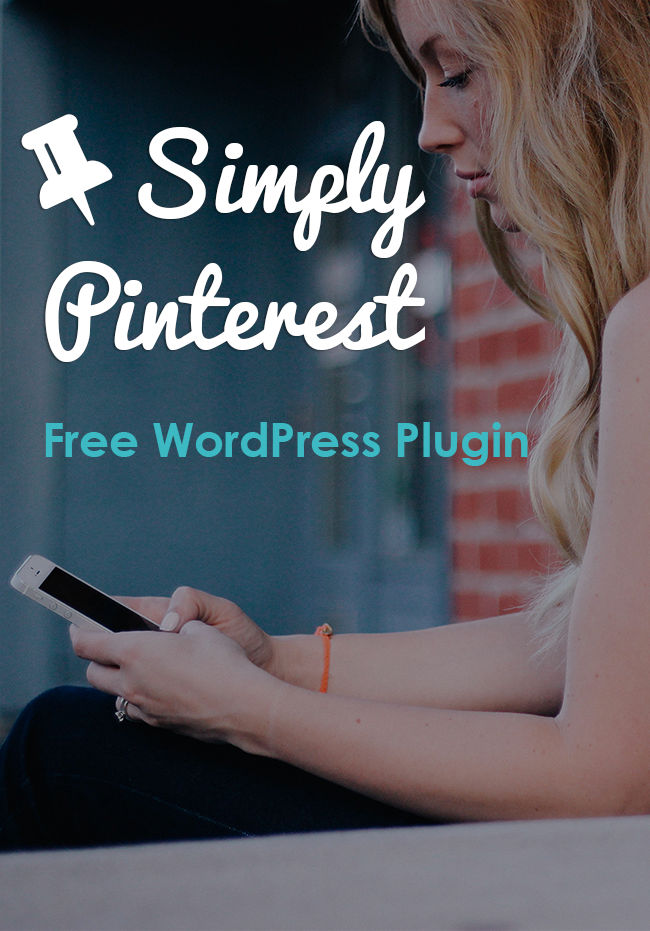
<style>
.page{position:relative;width:650px;height:931px}
.page>*{position:absolute;margin:0}
.t1{font:100px/136.7px "Pacifico";color:#ffffff}
.t2{font:103.3px "FontAwesome";color:#ffffff}
.t3{font:100px "Pacifico";color:#ffffff}
.t4{font:46.7px "CenturyGothic-Bold";color:#3cb9c2}
</style>
<div class="page">
<p class="t1" style="left:45px;top:121px;width:381px;height:241px"><span class="t2">   </span><span class="t3">Simply<br></span>Pinterest</p>
<p class="t4" style="left:45px;top:422px;width:483px;height:44px">Free WordPress Plugin</p>
</div>
